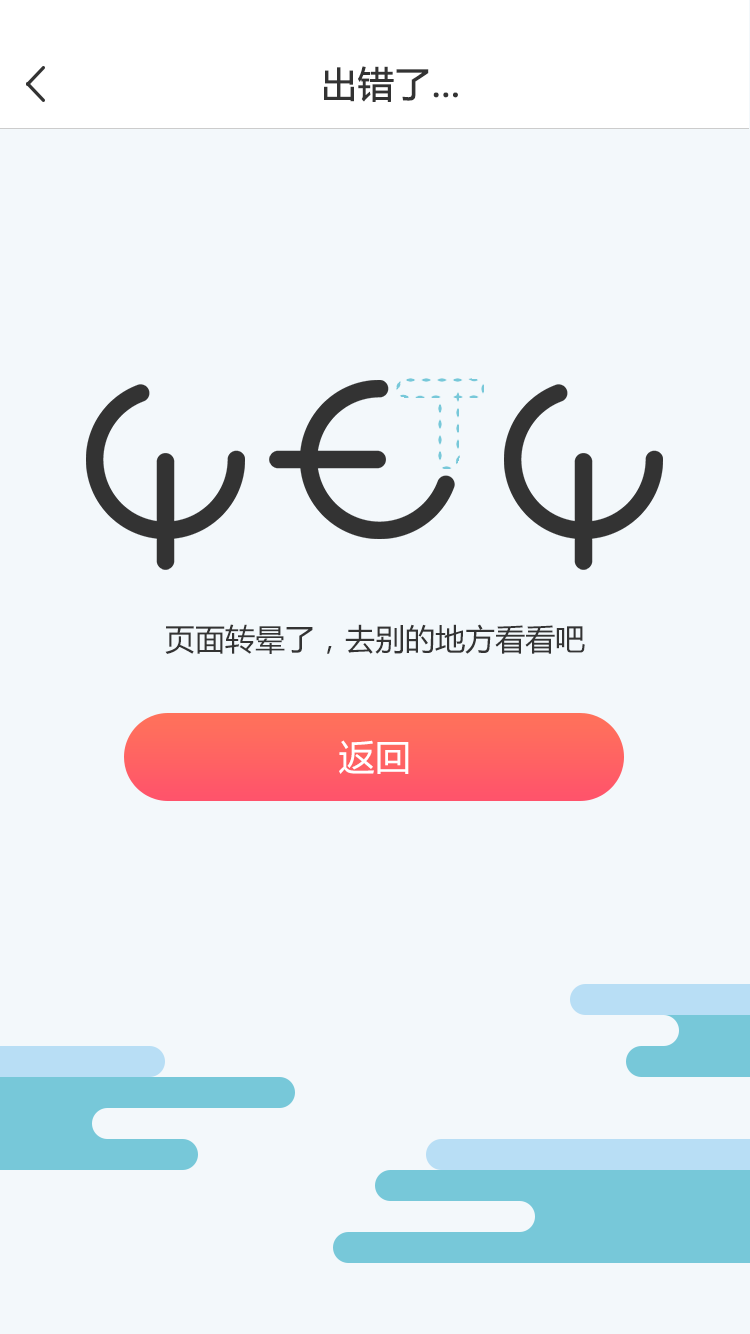
<style>
.page{position:relative;width:750px;height:1334px;background:#f3f8fb}
.page>*{position:absolute;margin:0}
.t1{font:36px "MicrosoftYaHei";color:#333333;font-weight:bold}
.t2{font:30px "MicrosoftYaHei";color:#333333}
.t3{font:36px "MicrosoftYaHei";color:#ffffff}
</style>
<div class="page">
<p class="t1" style="left:324px;top:66px;width:134px;height:36px">出错了...</p>
<p class="t2" style="left:165px;top:624px;width:420px;height:30px">页面转晕了，去别的地方看看吧</p>
<p class="t3" style="left:339px;top:740px;width:70px;height:34px">返回</p>
</div>
